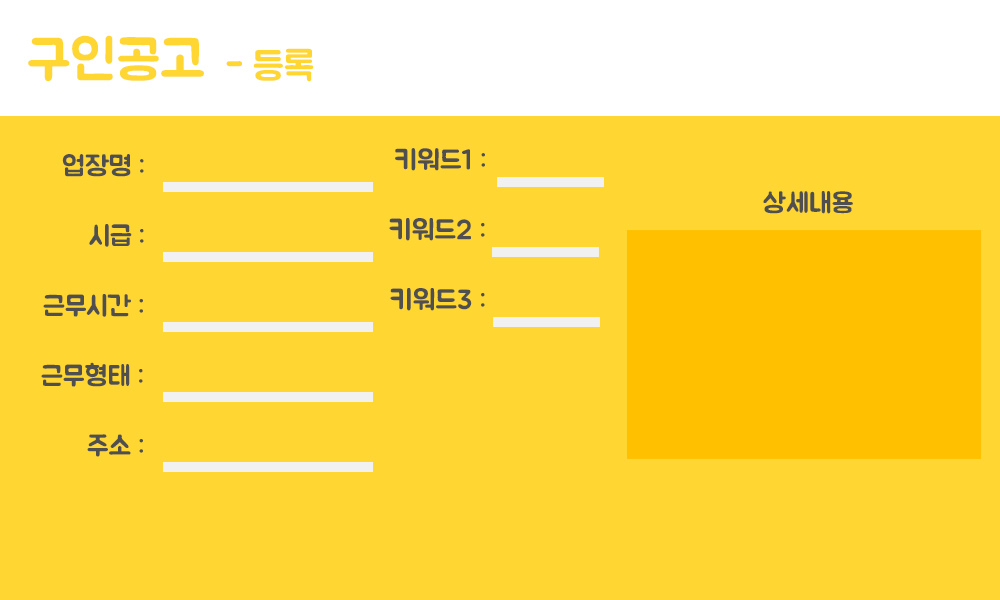
<style>
.page{position:relative;width:1000px;height:600px;background:#ffd632}
.page>*{position:absolute;margin:0}
.t1{font:55.6px "BMJUA";color:#ffd632}
.t2{font:38.9px "BMJUA";color:#ffd632}
.t3{font:27.6px "BMJUA";color:#4f4f4f}
.t4{font:27.8px "BMJUA";color:#4f4f4f}
</style>
<div class="page">
<p class="t1" style="left:28px;top:35px;width:176px;height:46px">구인공고</p>
<p class="t2" style="left:226px;top:48px;width:88px;height:34px">- 등록</p>
<p class="t3" style="left:395px;top:148px;width:90px;height:23px">키워드1 :</p>
<p class="t3" style="left:62px;top:154px;width:82px;height:23px">업장명 :</p>
<p class="t3" style="left:763px;top:191px;width:90px;height:23px">상세내용</p>
<p class="t4" style="left:389px;top:218px;width:96px;height:23px">키워드2 :</p>
<p class="t4" style="left:89px;top:224px;width:55px;height:23px">시급 :</p>
<p class="t4" style="left:43px;top:294px;width:100px;height:23px">근무시간 :</p>
<p class="t4" style="left:390px;top:288px;width:95px;height:23px">키워드3 :</p>
<p class="t4" style="left:41px;top:362px;width:102px;height:25px">근무형태 :</p>
<p class="t4" style="left:87px;top:434px;width:56px;height:23px">주소 :</p>
</div>
